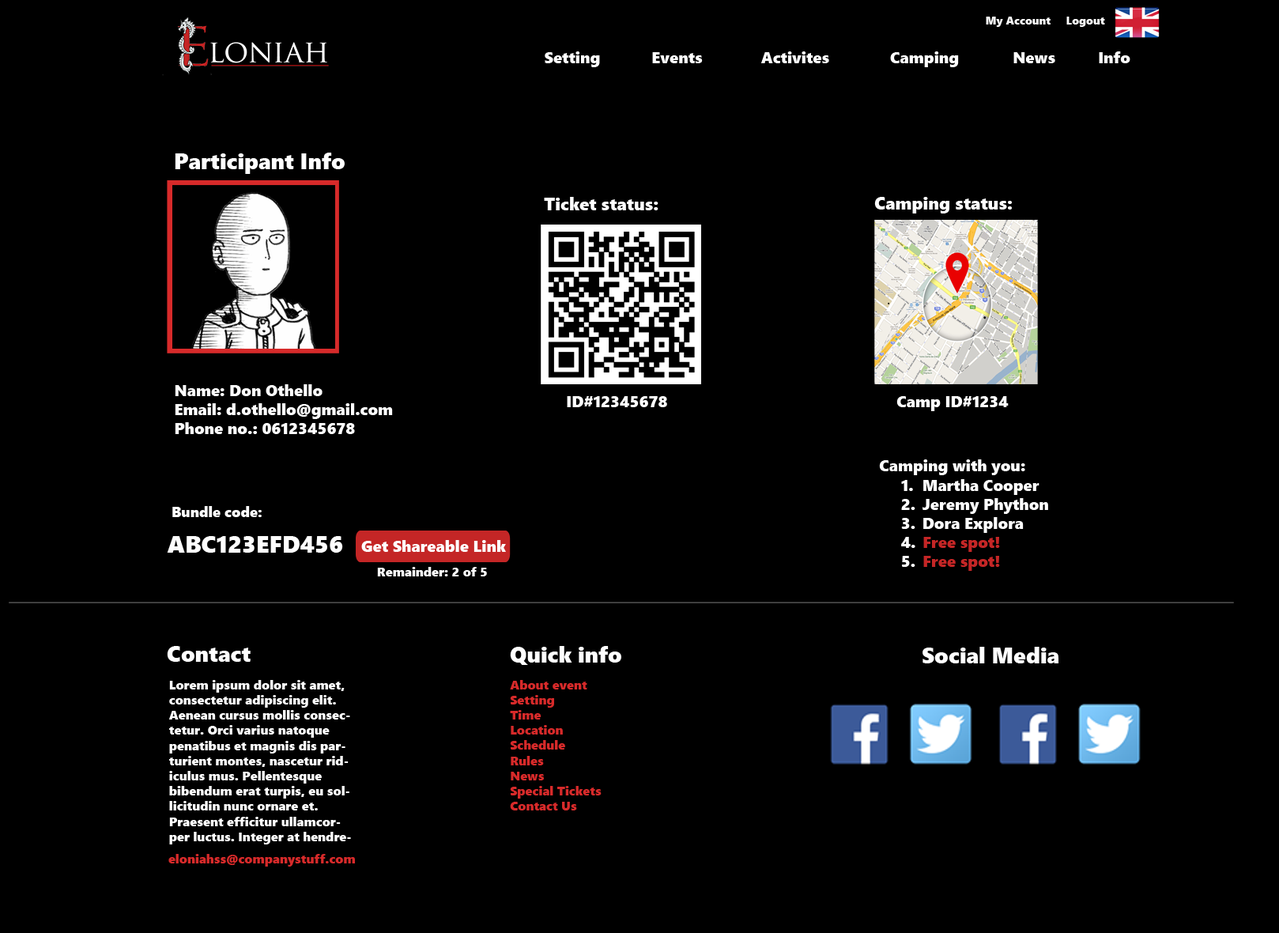
<style>
.page{position:relative;width:1279px;height:933px;background:#000000}
.page>*{position:absolute;margin:0}
.t1{font:11.1px "SegoeUIBlack";color:#ffffff}
.t2{font:15.8px "SegoeUIBlack";color:#ffffff}
.t3{font:22.1px "SegoeUIBlack";color:#ffffff}
.t4{font:17.4px "SegoeUIBlack";color:#ffffff}
.t5{font:14.2px "SegoeUIBlack";color:#ffffff}
.t6{font:23.7px "SegoeUIBlack";color:#ffffff}
.t7{font:15.8px "SegoeUIBlack";color:#c42626}
.t8{font:12.6px "SegoeUIBlack";color:#ffffff}
.t9{font:12.6px "SegoeUIBlack";color:#d72a2a}
</style>
<div class="page">
<p class="t1" style="left:985px;top:17px;width:120px;height:10px">My Account     Logout</p>
<p class="t2" style="left:545px;top:51px;width:585px;height:16px">Setting       Events      Activites   Camping     News     Info</p>
<p class="t3" style="left:175px;top:153px;width:170px;height:21px">Participant Info</p>
<p class="t4" style="left:544px;top:197px;width:114px;height:13px">Ticket status:</p>
<p class="t4" style="left:874px;top:197px;width:138px;height:16px">Camping status:</p>
<p class="t2" style="left:175px;top:384px;width:218px;height:50px">Name: Don Othello<br>Email: d.othello@gmail.com<br>Phone no.: 0612345678</p>
<p class="t2" style="left:567px;top:396px;width:100px;height:11px">ID#12345678</p>
<p class="t2" style="left:896px;top:396px;width:112px;height:15px">Camp ID#1234</p>
<p class="t2" style="left:879px;top:459px;width:146px;height:16px">Camping with you:</p>
<p class="t2" style="left:901px;top:480px;width:14px;height:87px">1.<br>2.<br>3.<br>4.<br>5.</p>
<p class="t2" style="left:922px;top:479px;width:126px;height:54px">Martha Cooper<br>Jeremy Phython<br>Dora Explora</p>
<p class="t5" style="left:172px;top:506px;width:90px;height:11px">Bundle code:</p>
<p class="t6" style="left:167px;top:536px;width:176px;height:16px">ABC123EFD456</p>
<p class="t2" style="left:361px;top:540px;width:145px;height:12px">Get Shareable Link</p>
<p class="t7" style="left:923px;top:537px;width:77px;height:15px">Free spot!</p>
<p class="t7" style="left:923px;top:556px;width:77px;height:15px">Free spot!</p>
<p class="t8" style="left:377px;top:567px;width:110px;height:9px">Remainder: 2 of 5</p>
<p class="t3" style="left:167px;top:646px;width:84px;height:15px">Contact</p>
<p class="t3" style="left:510px;top:646px;width:111px;height:19px">Quick info</p>
<p class="t3" style="left:922px;top:646px;width:136px;height:17px">Social Media</p>
<p class="t8" style="left:168px;top:680px;width:183px;height:164px">Lorem ipsum dolor sit amet, consectetur adipiscing elit. Aenean cursus mollis consectetur. Orci varius natoque penatibus et magnis dis parturient montes, nascetur ridiculus mus. Pellentesque bibendum erat turpis, eu sollicitudin nunc ornare et. Praesent efficitur ullamcorper luctus. Integer at hendrerit odio. Vestibulum ante ipsum primis in faucibus orci luctus et ultrices posuere cubilia Curae; Sed varius turpis at turpis volutpat pellentesque. Vestibulum ultricies in urna ut volutpat. Suspendisse potenti.</p>
<p class="t9" style="left:510px;top:680px;width:91px;height:130px">About event<br>Setting<br>Time<br>Location<br>Schedule<br>Rules<br>News<br>Special Tickets<br>Contact Us</p>
<p class="t9" style="left:168px;top:854px;width:187px;height:12px">eloniahss@companystuff.com</p>
</div>
